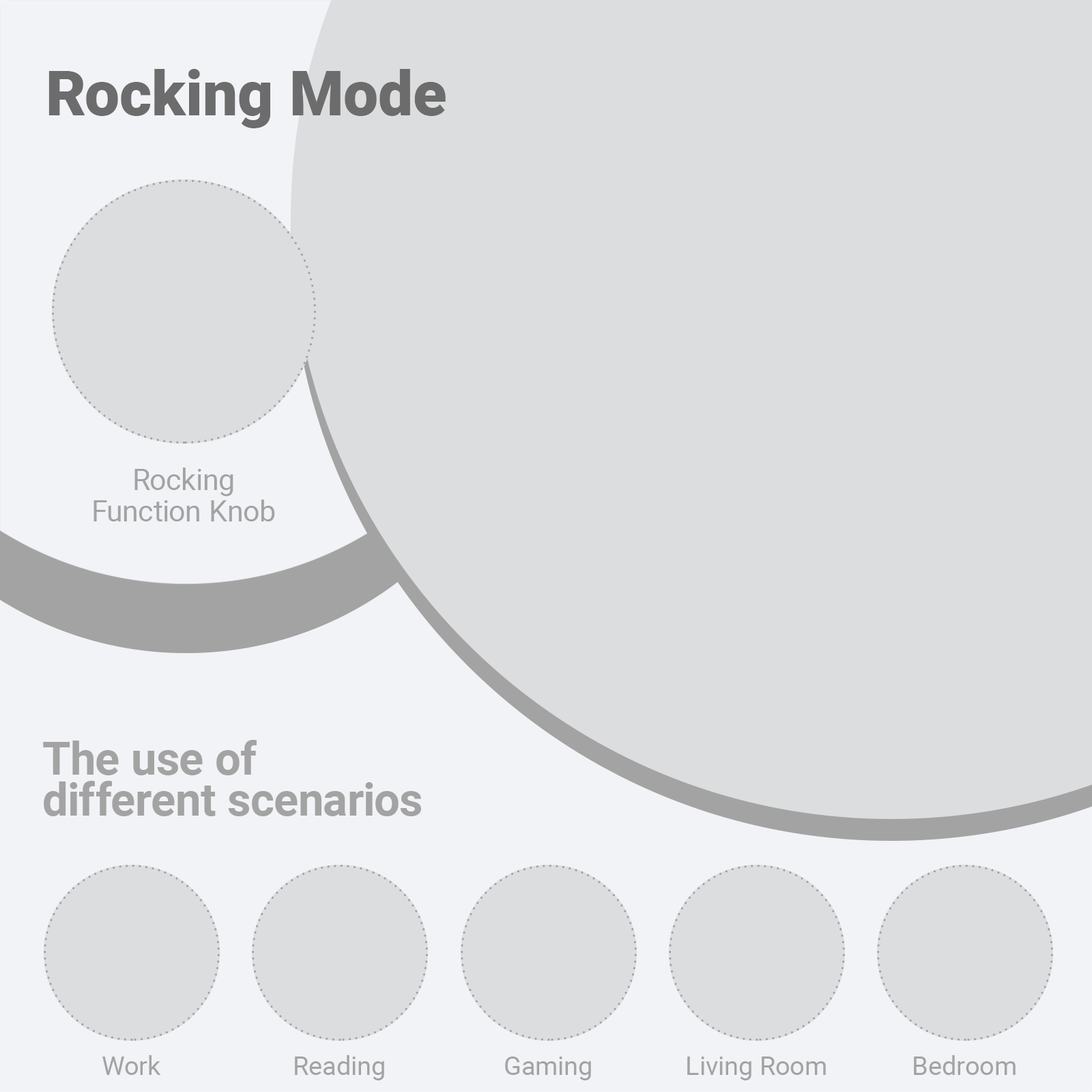
<style>
.page{position:relative;width:1092px;height:1092px;background:#dcdddf}
.page>*{position:absolute;margin:0}
.t1{font:62.4px "Roboto-Black";color:#6c6c6c}
.t2{font:29.1px/31.3px "Roboto-Regular";color:#a3a3a3}
.t3{font:45.9px/40.8px "Roboto-Bold";color:#a3a3a3}
.t4{font:26.2px "Roboto-Regular";color:#a3a3a3}
</style>
<div class="page">
<p class="t1" style="left:48px;top:69px;width:398px;height:59px">Rocking Mode</p>
<p class="t2" style="left:94px;top:468px;width:181px;height:53px;text-align:center">Rocking<br>Function Knob</p>
<p class="t3" style="left:43px;top:740px;width:378px;height:76px">The use of<br>different scenarios</p>
<p class="t4" style="left:102px;top:1055px;width:59px;height:20px">Work</p>
<p class="t4" style="left:295px;top:1055px;width:89px;height:25px">Reading</p>
<p class="t4" style="left:505px;top:1056px;width:86px;height:24px">Gaming</p>
<p class="t4" style="left:687px;top:1056px;width:139px;height:24px">Living Room</p>
<p class="t4" style="left:914px;top:1055px;width:102px;height:20px">Bedroom</p>
</div>
